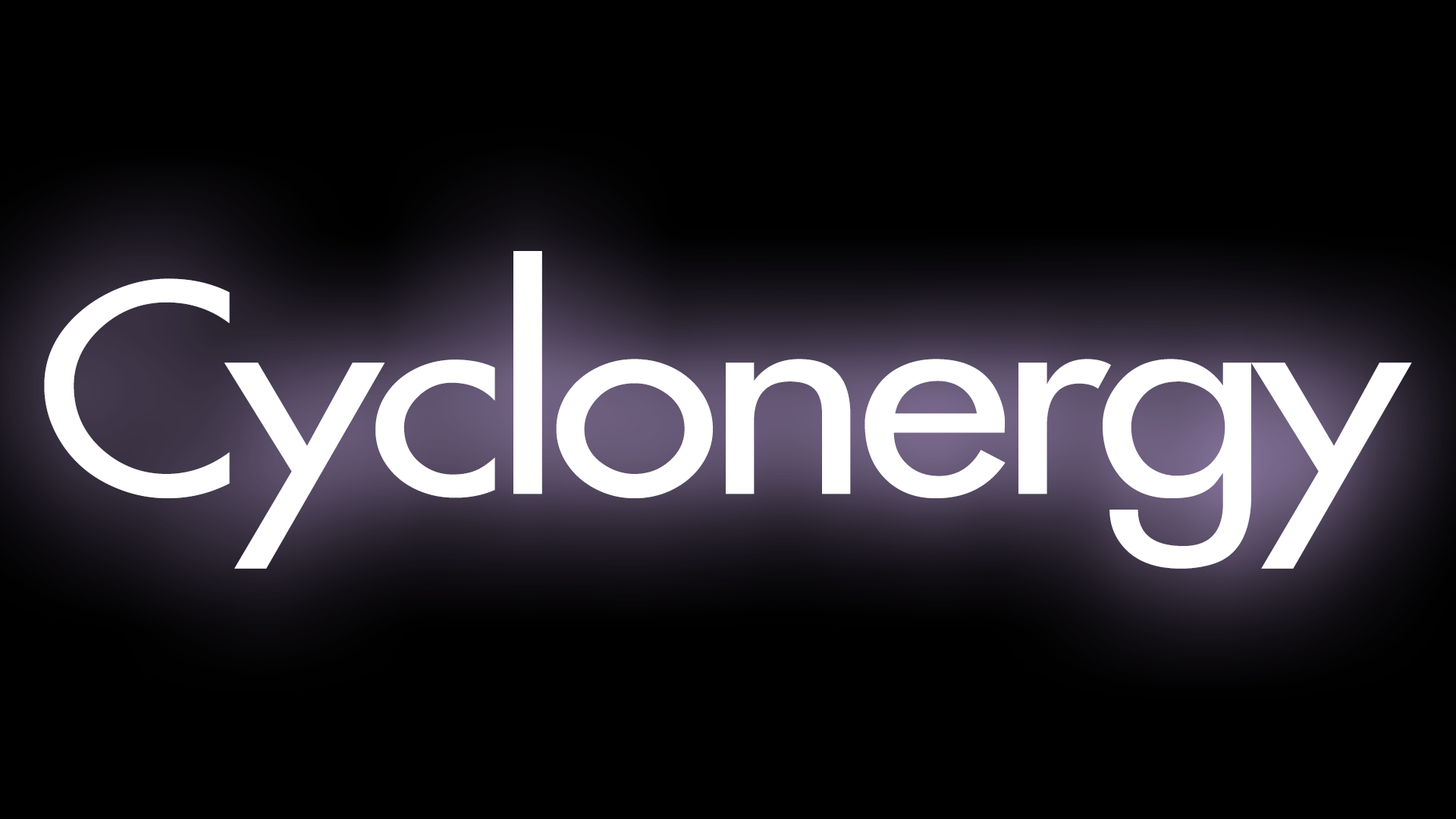
<style>
.page{position:relative;width:1456px;height:819px;background:#000000}
.page>*{position:absolute;margin:0}
.t1{font:279.1px "FuturaExtended";letter-spacing:-0.04em;color:#ffffff;scale:1.12 1}
</style>
<div class="page">
<p class="t1" style="left:44px;top:251px;width:1368px;height:318px">Cyclonergy</p>
</div>
